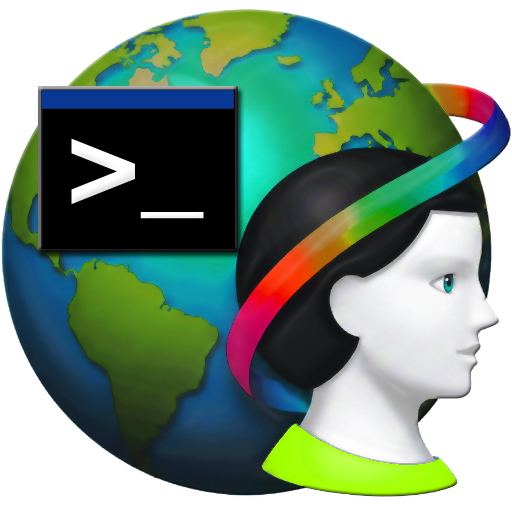
<style>
.page{position:relative;width:512px;height:512px;background:#ffffff}
.page>*{position:absolute;margin:0}
.t1{font:124.9px "HelveticaNeueLTStd-BdIt";color:#ffffff}
</style>
<div class="page">
<p class="t1" style="left:71px;top:138px;width:133px;height:81px">&gt;_</p>
</div>
